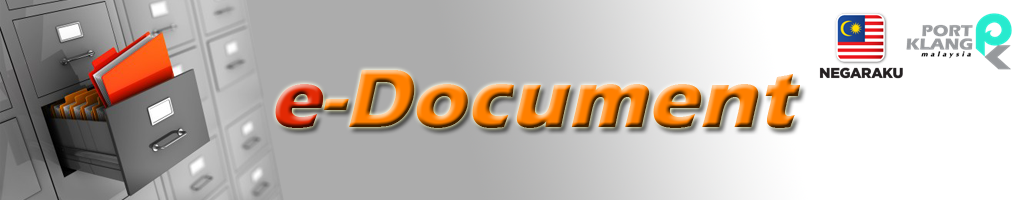
<style>
.page{position:relative;width:1028px;height:200px;background:#ffffff}
.page>*{position:absolute;margin:0}
.t1{font:85px "ErasITC-Bold";letter-spacing:0.01em;font-style:italic}
</style>
<div class="page">
<p class="t1" style="left:275px;top:70px;width:525px;height:58px">e-Document</p>
</div>
